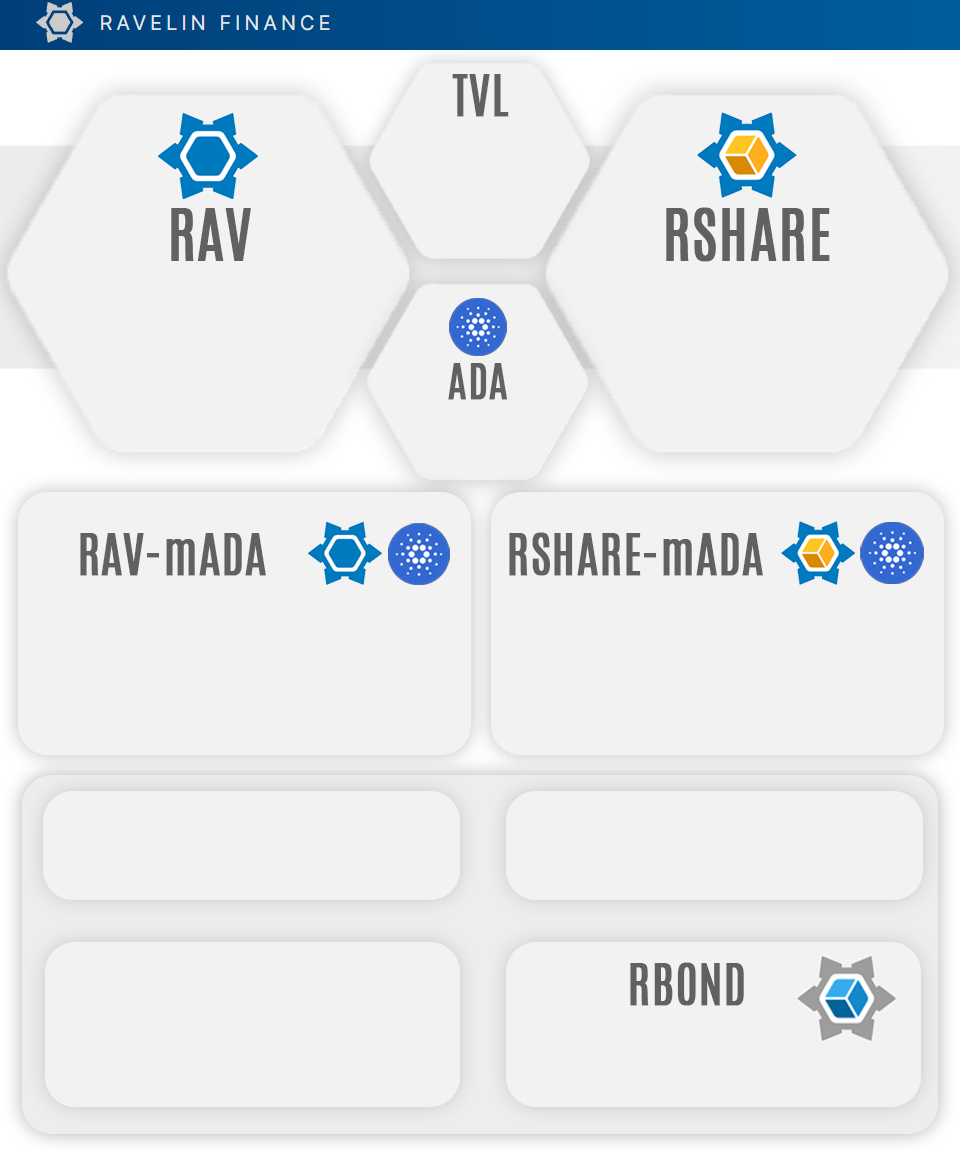
<style>
.page{position:relative;width:960px;height:1151px;background:#f2f2f2}
.page>*{position:absolute;margin:0}
.t1{font:48px "Antonio-Regular";color:#616161;font-weight:bold}
.t2{font:60px "Antonio-Regular";color:#616161;font-weight:bold}
.t3{font:42.3px "Antonio-Regular";color:#616161;font-weight:bold}
</style>
<div class="page">
<p class="t1" style="left:452px;top:74px;width:57px;height:43px">TVL</p>
<p class="t2" style="left:171px;top:208px;width:80px;height:53px">RAV</p>
<p class="t2" style="left:666px;top:207px;width:164px;height:55px">RSHARE</p>
<p class="t3" style="left:448px;top:363px;width:59px;height:37px">ADA</p>
<p class="t1" style="left:80px;top:533px;width:186px;height:43px">RAV-mADA</p>
<p class="t1" style="left:509px;top:532px;width:254px;height:44px">RSHARE-mADA</p>
<p class="t1" style="left:630px;top:962px;width:114px;height:44px">RBOND</p>
</div>
